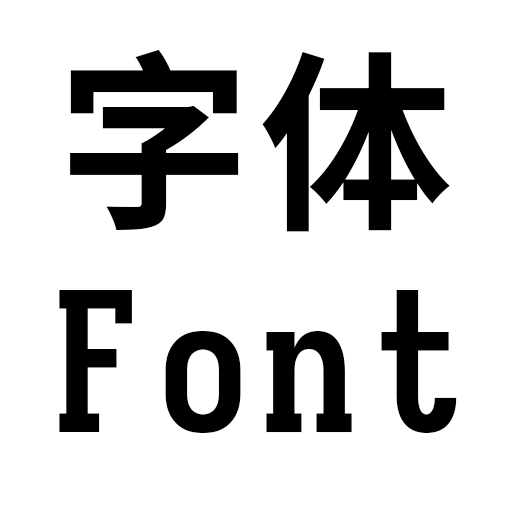
<style>
.page{position:relative;width:512px;height:512px;background:#ffffff}
.page>*{position:absolute;margin:0}
.t1{font:192px "Sarasa-Mono-Slab-SC-Bold";letter-spacing:0.056em;color:#000000}
</style>
<div class="page">
<p class="t1" style="left:70px;top:49px;width:380px;height:183px">字体</p>
<p class="t1" style="left:59px;top:290px;width:398px;height:143px">Font</p>
</div>
